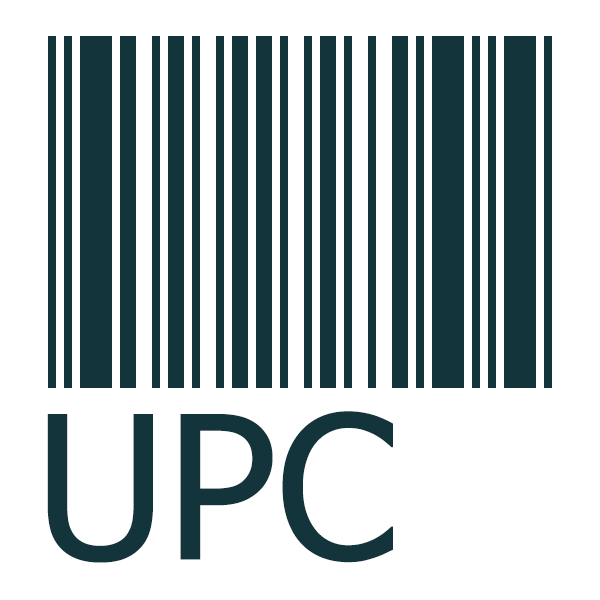
<style>
.page{position:relative;width:600px;height:600px;background:#ffffff}
.page>*{position:absolute;margin:0}
.t1{font:200px "Tahoma";color:#14343b}
</style>
<div class="page">
<p class="t1" style="left:47px;top:411px;width:346px;height:152px">UPC</p>
</div>
